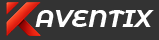
<style>
.page{position:relative;width:159px;height:40px;background:#333333}
.page>*{position:absolute;margin:0}
.t1{font:24px "MontserratAlternates-BoldItalic";color:#ffffff}
</style>
<div class="page">
<p class="t1" style="left:35px;top:10px;width:119px;height:17px">AVENTIX</p>
</div>
